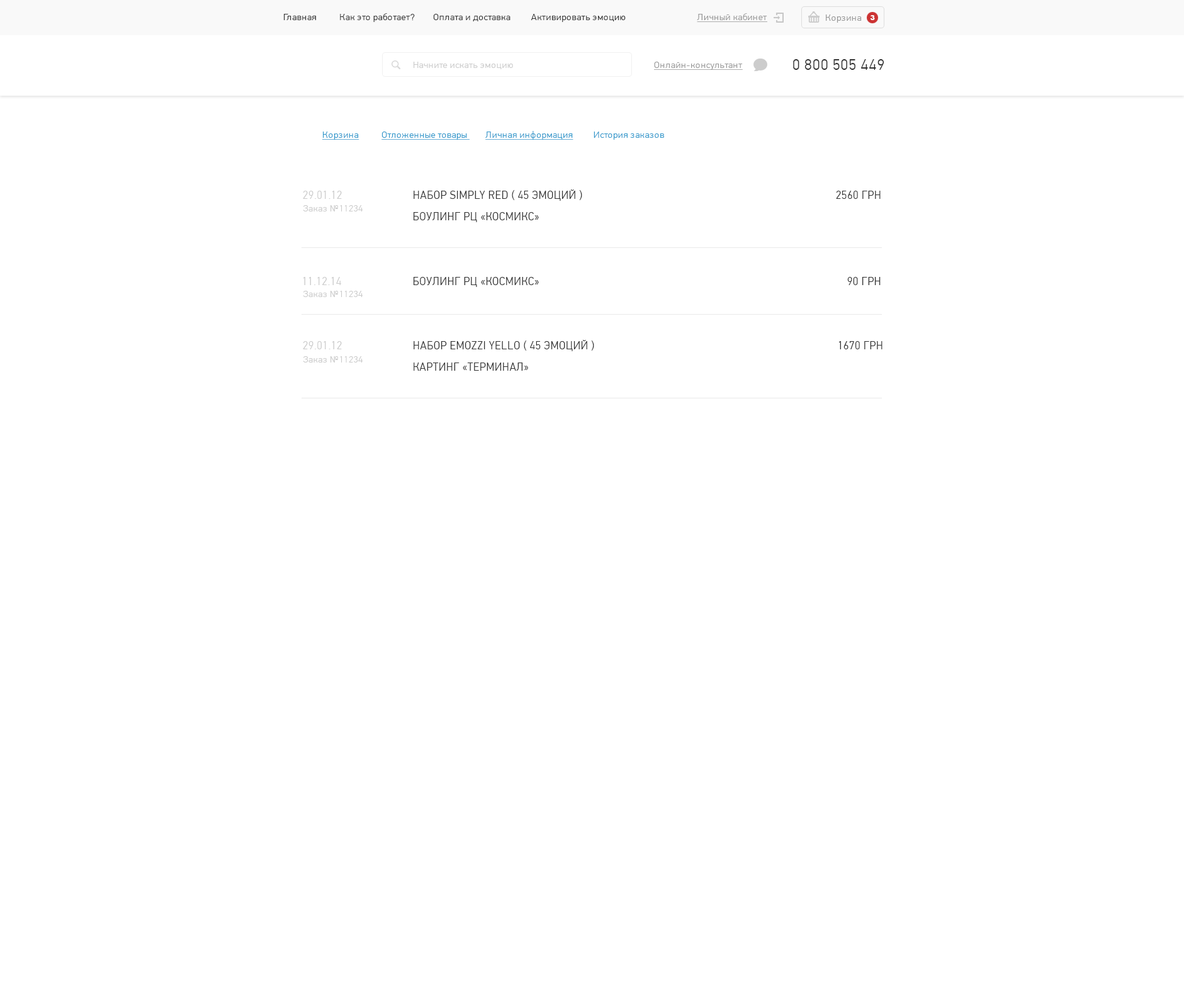
<style>
.page{position:relative;width:1184px;height:1007px;background:#ffffff}
.page>*{position:absolute;margin:0}
.t1{font:9.4px "PFDinTextPro-Light";letter-spacing:0.04em;color:#333333}
.t2{font:9.4px "PFDinTextPro-Light";letter-spacing:0.04em;color:#333333;text-transform:uppercase}
.t3{font:9.4px "PFDinTextPro-Light";letter-spacing:0.04em;color:#999999;text-decoration:underline}
.t4{font:9.4px "PFDinTextPro-Light";letter-spacing:0.04em;color:#999999;text-transform:uppercase;text-decoration:underline}
.t5{font:9.4px "PFDinTextPro-Light";letter-spacing:0.04em;color:#999999}
.t6{font:9.4px "PFDinTextPro-Light";letter-spacing:0.04em;color:#999999;text-transform:uppercase}
.t7{font:6.9px "Arial-Black";letter-spacing:0.04em;color:#ffffff;text-transform:uppercase}
.t8{font:9.4px "PFDinTextPro-Light";letter-spacing:0.04em;color:#cccccc}
.t9{font:15.1px "PFDinTextPro-Light";letter-spacing:0.04em;color:#333333;text-transform:uppercase}
.t10{font:9.4px "PFDinTextPro-Light";letter-spacing:0.04em;color:#3399cc;text-decoration:underline}
.t11{font:9.4px "PFDinTextPro-Light";letter-spacing:0.04em;color:#3399cc;text-transform:uppercase;text-decoration:underline}
.t12{font:9.4px "PFDinTextPro-Light";letter-spacing:0.04em;color:#3399cc}
.t13{font:11.1px "PFDinTextPro-Light";letter-spacing:0.05em;color:#cccccc;text-transform:uppercase;scale:0.96 1}
.t14{font:11.1px "PFDinTextPro-Light";letter-spacing:0.05em;color:#333333;text-transform:uppercase;scale:0.96 1}
.t15{font:9.4px "PFDinTextPro-Light";letter-spacing:0.04em;color:#cccccc;text-transform:uppercase}
</style>
<div class="page">
<p class="t1" style="left:284px;top:13px;width:342px;height:9px"><span class="t2">Г</span>лавная          <span class="t2">к</span>ак это работает?        Оплата и доставка         Активировать эмоцию</p>
<p class="t3" style="left:697px;top:13px;width:70px;height:9px"><span class="t4">л</span>ичный кабинет</p>
<p class="t5" style="left:826px;top:14px;width:36px;height:9px"><span class="t6">К</span>орзина</p>
<p class="t7" style="left:870px;top:15px;width:5px;height:5px">3</p>
<p class="t8" style="left:414px;top:62px;width:99px;height:7px">Начните искать эмоцию</p>
<p class="t3" style="left:654px;top:62px;width:89px;height:8px"><span class="t4">О</span>нлайн-консультант</p>
<p class="t9" style="left:793px;top:59px;width:91px;height:11px">0 800 505 449</p>
<p class="t10" style="left:322px;top:131px;width:342px;height:9px">Корзина          <span class="t11">О</span>тложенные товары        Личная информация         <span class="t12">История заказов</span></p>
<p class="t13" style="left:303px;top:191px;width:39px;height:8px">29.01.12</p>
<p class="t14" style="left:414px;top:189px;width:168px;height:12px">НАБОР SIMPLY RED ( 45 ЭМОЦИЙ )</p>
<p class="t14" style="left:836px;top:191px;width:45px;height:8px">2560 грн</p>
<p class="t8" style="left:303px;top:205px;width:60px;height:6px"><span class="t15">з</span>аказ №11234</p>
<p class="t14" style="left:414px;top:212px;width:125px;height:10px">боулинг рц «космикс»</p>
<p class="t13" style="left:303px;top:277px;width:38px;height:8px">11.12.14</p>
<p class="t14" style="left:414px;top:277px;width:125px;height:10px">боулинг рц «космикс»</p>
<p class="t14" style="left:847px;top:277px;width:34px;height:8px">90 грн</p>
<p class="t8" style="left:303px;top:291px;width:60px;height:6px"><span class="t15">з</span>аказ №11234</p>
<p class="t13" style="left:303px;top:341px;width:39px;height:8px">29.01.12</p>
<p class="t14" style="left:414px;top:340px;width:180px;height:11px">НАБОР emozzi yello ( 45 ЭМОЦИЙ )</p>
<p class="t14" style="left:839px;top:341px;width:43px;height:8px">1670 грн</p>
<p class="t8" style="left:303px;top:356px;width:60px;height:7px"><span class="t15">з</span>аказ №11234</p>
<p class="t14" style="left:414px;top:363px;width:114px;height:8px">картинг «терминал»</p>
</div>
